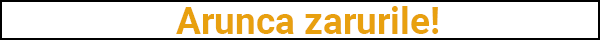
<style>
.page{position:relative;width:600px;height:40px;background:#ffffff}
.page>*{position:absolute;margin:0}
.t1{font:37px "Roboto-Bold";color:#e8a00f}
</style>
<div class="page">
<p class="t1" style="left:176px;top:6px;width:263px;height:28px">Arunca zarurile!</p>
</div>
